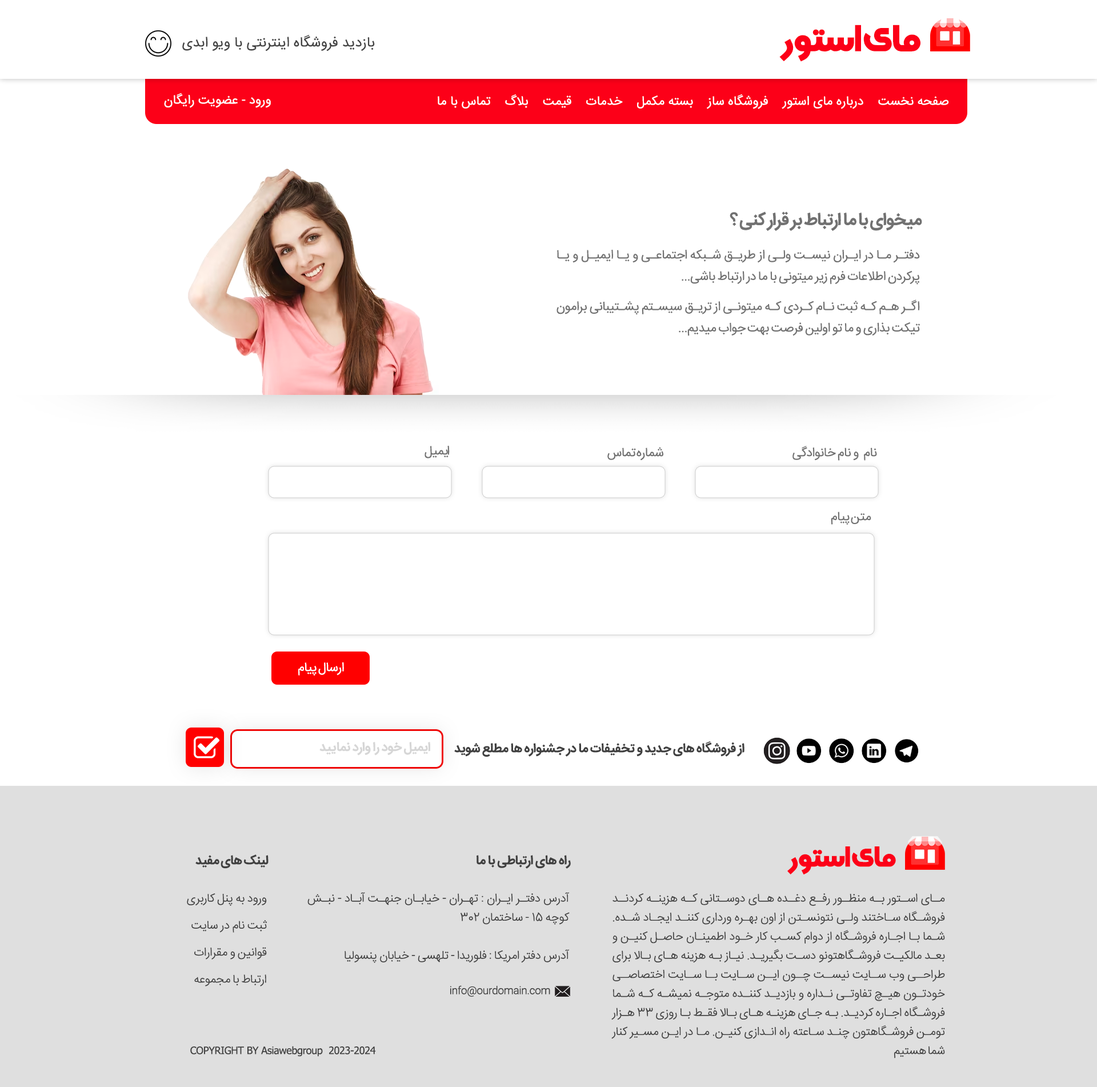
<style>
.page{position:relative;width:1097px;height:1087px;background:#ffffff}
.page>*{position:absolute;margin:0}
.t1{font:37.3px "SultanAdan";letter-spacing:-0.04em;color:#fc0018}
.t2{font:14px "IRANSansFaNum";color:#444444}
.t3{font:12.7px "IRANSansFaNum";color:#ffffff}
.t4{font:17.5px "IRANSansFaNum-Bold";letter-spacing:-0.04em;color:#717171}
.t5{font:12.7px/21.4px "IRANSansFaNum";letter-spacing:-0.04em;color:#717171}
.t6{font:12.7px/30.2px "IRANSansFaNum";letter-spacing:-0.04em;color:#717171}
.t7{font:12.7px "IRANSansFaNum";letter-spacing:-0.04em;color:#717171}
.t8{font:12.7px "IRANSansFaNum";letter-spacing:-0.04em;color:#ffffff}
.t9{font:12.7px "IRANSansFaNum-Bold";letter-spacing:-0.02em;color:#d6d6d6}
.t10{font:12.7px "IRANSansFaNum-Bold";letter-spacing:-0.02em;color:#404040}
.t11{font:28.7px "SultanAdan";letter-spacing:-0.04em;color:#fc0018}
.t12{font:11.9px/27px "IRANSansFaNum-Light";letter-spacing:-0.02em;color:#404040}
.t13{font:11.9px/19px "IRANSansFaNum-Light";letter-spacing:-0.02em;color:#404040}
.t14{font:10.2px "IRANSansFaNum-Light";letter-spacing:-0.02em;color:#404040}
.t15{font:10.3px "Tahoma";letter-spacing:-0.02em;color:#404040}
</style>
<div class="page">
<p class="t1" style="left:779px;top:25px;width:142px;height:37px">مای استور</p>
<p class="t2" style="left:182px;top:35px;width:193px;height:16px">بازدید فروشگاه اینترنتی با ویو ابدی</p>
<p class="t3" style="left:164px;top:93px;width:107px;height:15px">ورود - عضویت رایگان</p>
<p class="t3" style="left:438px;top:94px;width:511px;height:15px">صفحه نخست    درباره مای استور    فروشگاه ساز    بسته مکمل    خدمات    قیمت    بلاگ    تماس با ما</p>
<p class="t4" style="left:730px;top:211px;width:192px;height:20px">میخوای با ما ارتباط بر قرار کنی ؟</p>
<p class="t5" style="left:557px;top:249px;width:363px;height:87px;text-align:justify">دفتر ما در ایران نیست ولی از طریق شبکه اجتماعی و یا ایمیل و یا پرکردن اطلاعات فرم زیر میتونی با ما در ارتباط باشی...<br><span class="t6">اگر هم که ثبت نام کردی که میتونی از تریق سیستم پشتیبانی برامون </span>تیکت بذاری و ما تو اولین فرصت بهت جواب میدیم...</p>
<p class="t7" style="left:425px;top:446px;width:25px;height:12px">ایمیل</p>
<p class="t7" style="left:607px;top:447px;width:56px;height:14px">شماره تماس</p>
<p class="t7" style="left:793px;top:446px;width:84px;height:15px">نام  و نام خانوادگی</p>
<p class="t7" style="left:831px;top:511px;width:40px;height:14px">متن پیام</p>
<p class="t8" style="left:298px;top:662px;width:46px;height:13px">ارسال پیام</p>
<p class="t9" style="left:319px;top:742px;width:111px;height:13px">ایمیل خود را وارد نمایید</p>
<p class="t10" style="left:454px;top:741px;width:291px;height:16px">از فروشگاه های جدید و تخفیفات ما در جشنواره ها مطلع شوید</p>
<p class="t10" style="left:195px;top:854px;width:74px;height:15px">لینک های مفید</p>
<p class="t10" style="left:477px;top:855px;width:94px;height:14px">راه های ارتباطی با ما</p>
<p class="t11" style="left:787px;top:846px;width:109px;height:29px">مای استور</p>
<p class="t12" style="left:187px;top:893px;width:80px;height:93px;text-align:justify">ورود به پنل کاربری<br>ثبت نام در سایت<br>قوانین و مقرارات <br>ارتباط با مجموعه</p>
<p class="t13" style="left:307px;top:892px;width:263px;height:71px;text-align:justify">آدرس دفتر ایران : تهران - خیابان جنهت آباد - نبش کوچه 15 - ساختمان 302<br><br>آدرس دفتر امریکا : فلوریدا - تلهسی - خیابان پنسولیا</p>
<p class="t13" style="left:611px;top:893px;width:334px;height:165px;text-align:justify">مای استور به منظور رفع دغده های دوستانی که هزینه کردند فروشگاه ساختند ولی نتونستن از اون بهره ورداری کنند ایجاد شده. شما با اجاره فروشگاه از دوام کسب کار خود اطمینان حاصل کنین و بعد مالکیت فروشگاهتونو دست بگیرید. نیاز به هزینه های بالا برای طراحی وب سایت نیست چون این سایت با سایت اختصاصی خودتون هیچ تفاوتی نداره و بازدید کننده متوجه نمیشه که شما فروشگاه اجاره کردید. به جای هزینه های بالا فقط با روزی 33 هزار تومن فروشگاهتون چند ساعته راه اندازی کنین. ما در این مسیر کنار شما هستیم</p>
<p class="t14" style="left:450px;top:985px;width:100px;height:12px">info@ourdomain.com</p>
<p class="t15" style="left:190px;top:1046px;width:186px;height:11px">COPYRIGHT BY Asiawebgroup  2023-2024</p>
</div>
